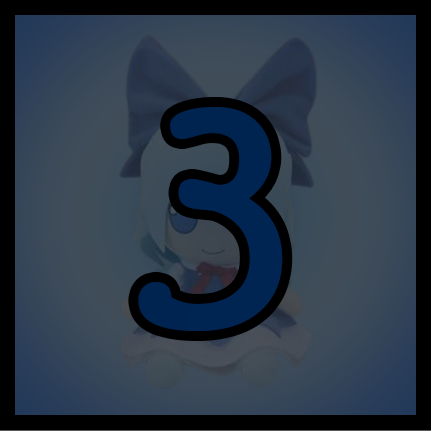
<style>
.page{position:relative;width:431px;height:431px}
.page>*{position:absolute;margin:0}
.t1{font:328.9px "KristenITC-Regular";color:#002552}
</style>
<div class="page">
<p class="t1" style="left:138px;top:107px;width:145px;height:224px">3</p>
</div>
